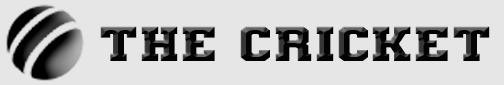
<style>
.page{position:relative;width:504px;height:85px;background:#e6e6e6}
.page>*{position:absolute;margin:0}
.t1{font:49.1px "VarsityTeamBold";scale:1.34 1}
</style>
<div class="page">
<p class="t1" style="left:100px;top:26px;width:390px;height:35px">the Cricket</p>
</div>
